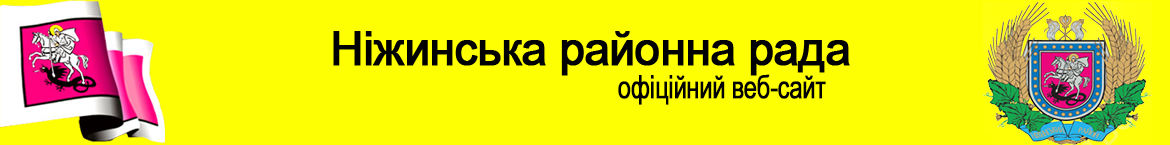
<style>
.page{position:relative;width:1170px;height:145px;background:#ffff03}
.page>*{position:absolute;margin:0}
.t1{font:48px "ArialNarrow";letter-spacing:-0.025em;color:#000000;font-weight:bold;scale:1.15 1}
.t2{font:32px "ArialNarrow";letter-spacing:-0.025em;color:#000000;font-weight:bold;scale:0.88 1}
</style>
<div class="page">
<p class="t1" style="left:333px;top:31px;width:517px;height:45px">Ніжинська районна рада</p>
<p class="t2" style="left:618px;top:74px;width:208px;height:31px">офіційний веб-сайт</p>
</div>
